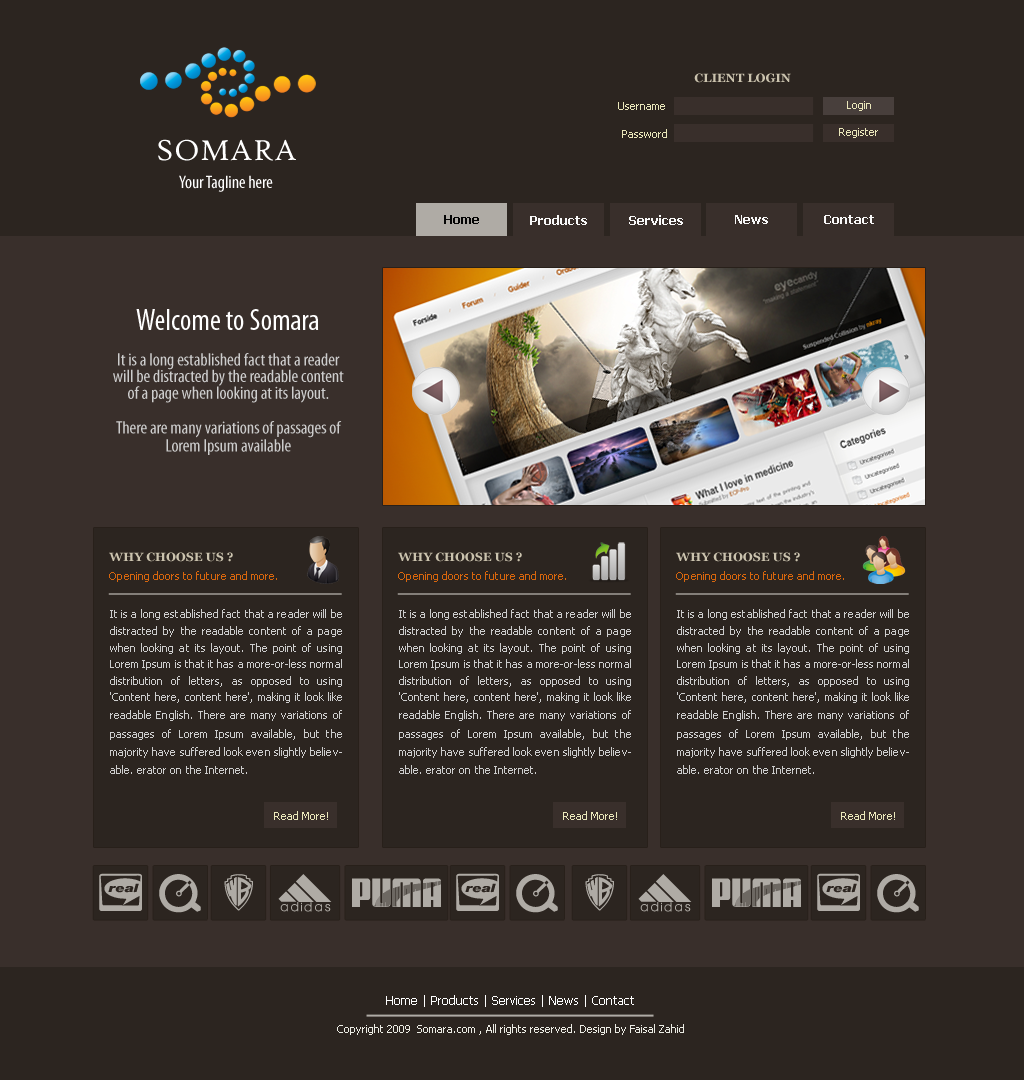
<style>
.page{position:relative;width:1024px;height:1080px;background:#2c2520}
.page>*{position:absolute;margin:0}
.t1{font:12px "Georgia-Bold";color:#cbc3ae}
.t2{font:11px "Tahoma";color:#eae7ba}
.t3{font:31px "HighTowerText-Reg";color:#ffffff}
.t4{font:18px "MyriadPro-Cond";color:#ffffff}
.t5{font:13px "Tahoma-Bold";color:#050505}
.t6{font:13px "Tahoma-Bold";color:#f8f8f8}
.t7{font:30px "MyriadPro-Cond";color:#ffffff}
.t8{font:18px/16.6px "MyriadPro-Cond";color:#cdcdcd}
.t9{font:18px/18px "MyriadPro-Cond";color:#cdcdcd}
.t10{font:11px "Tahoma";color:#d8660d}
.t11{font:11px/16.6px "Tahoma";color:#cdcdcd}
.t12{font:11px/18px "Tahoma";color:#cdcdcd}
.t13{font:35.4px "FamousLogos";color:#afaba5}
.t14{font:12px "Tahoma";color:#ffffff}
.t15{font:11px "Tahoma";color:#ecece4}
</style>
<div class="page">
<p class="t1" style="left:694px;top:73px;width:97px;height:10px">CLIENT LOGIN</p>
<p class="t2" style="left:618px;top:102px;width:47px;height:8px">Username</p>
<p class="t2" style="left:847px;top:101px;width:24px;height:10px">Login</p>
<p class="t2" style="left:622px;top:129px;width:45px;height:9px">Password</p>
<p class="t2" style="left:839px;top:128px;width:39px;height:10px">Register</p>
<p class="t3" style="left:158px;top:139px;width:138px;height:22px">SOMARA</p>
<p class="t4" style="left:179px;top:175px;width:94px;height:17px">Your Tagline here</p>
<p class="t5" style="left:444px;top:215px;width:35px;height:9px">Home</p>
<p class="t6" style="left:530px;top:215px;width:57px;height:10px">Products</p>
<p class="t6" style="left:629px;top:215px;width:54px;height:10px">Services</p>
<p class="t6" style="left:735px;top:215px;width:33px;height:9px">News</p>
<p class="t6" style="left:824px;top:215px;width:50px;height:9px">Contact</p>
<p class="t7" style="left:136px;top:309px;width:183px;height:21px">Welcome to Somara</p>
<p class="t8" style="left:113px;top:353px;width:231px;height:50px;text-align:center">It is a long established fact that a reader will be distracted by the readable content of a page when looking at its layout.</p>
<p class="t9" style="left:116px;top:421px;width:226px;height:34px;text-align:center">There are many variations of passages of Lorem Ipsum available</p>
<p class="t1" style="left:109px;top:552px;width:124px;height:10px">WHY CHOOSE US ?</p>
<p class="t1" style="left:398px;top:552px;width:124px;height:10px">WHY CHOOSE US ?</p>
<p class="t1" style="left:676px;top:552px;width:124px;height:10px">WHY CHOOSE US ?</p>
<p class="t10" style="left:109px;top:571px;width:168px;height:11px">Opening doors to future and more.</p>
<p class="t10" style="left:398px;top:571px;width:168px;height:11px">Opening doors to future and more.</p>
<p class="t10" style="left:676px;top:571px;width:168px;height:11px">Opening doors to future and more.</p>
<p class="t11" style="left:110px;top:609px;width:232px;height:165px;text-align:justify">It is a long established fact that a reader will be distracted by the readable content of a page when looking at its layout. The point of using Lorem Ipsum is that it has a more-or-less normal distribution of letters, as opposed to using 'Content here, content here', making it look like readable English. <span class="t12">There are many variations of passages of Lorem Ipsum available, but the majority have suffered look even slightly believable. erator on the Internet.</span></p>
<p class="t11" style="left:399px;top:609px;width:232px;height:165px;text-align:justify">It is a long established fact that a reader will be distracted by the readable content of a page when looking at its layout. The point of using Lorem Ipsum is that it has a more-or-less normal distribution of letters, as opposed to using 'Content here, content here', making it look like readable English. <span class="t12">There are many variations of passages of Lorem Ipsum available, but the majority have suffered look even slightly believable. erator on the Internet.</span></p>
<p class="t11" style="left:677px;top:609px;width:232px;height:165px;text-align:justify">It is a long established fact that a reader will be distracted by the readable content of a page when looking at its layout. The point of using Lorem Ipsum is that it has a more-or-less normal distribution of letters, as opposed to using 'Content here, content here', making it look like readable English. <span class="t12">There are many variations of passages of Lorem Ipsum available, but the majority have suffered look even slightly believable. erator on the Internet.</span></p>
<p class="t2" style="left:274px;top:811px;width:54px;height:9px">Read More!</p>
<p class="t2" style="left:563px;top:811px;width:54px;height:9px">Read More!</p>
<p class="t2" style="left:841px;top:811px;width:54px;height:9px">Read More!</p>
<p class="t13" style="left:99px;top:873px;width:43px;height:38px">w</p>
<p class="t13" style="left:159px;top:874px;width:42px;height:39px">x</p>
<p class="t13" style="left:224px;top:874px;width:29px;height:37px">W</p>
<p class="t13" style="left:278px;top:874px;width:54px;height:38px">C</p>
<p class="t13" style="left:352px;top:878px;width:89px;height:29px">V</p>
<p class="t13" style="left:456px;top:873px;width:43px;height:38px">w</p>
<p class="t13" style="left:516px;top:874px;width:42px;height:39px">x</p>
<p class="t13" style="left:585px;top:874px;width:29px;height:37px">W</p>
<p class="t13" style="left:638px;top:874px;width:54px;height:38px">C</p>
<p class="t13" style="left:712px;top:878px;width:89px;height:29px">V</p>
<p class="t13" style="left:817px;top:873px;width:43px;height:38px">w</p>
<p class="t13" style="left:877px;top:874px;width:42px;height:39px">x</p>
<p class="t14" style="left:386px;top:995px;width:248px;height:12px">Home | Products | Services | News | Contact</p>
<p class="t15" style="left:337px;top:1024px;width:347px;height:11px">Copyright 2009  Somara.com , All rights reserved. Design by Faisal Zahid</p>
</div>
